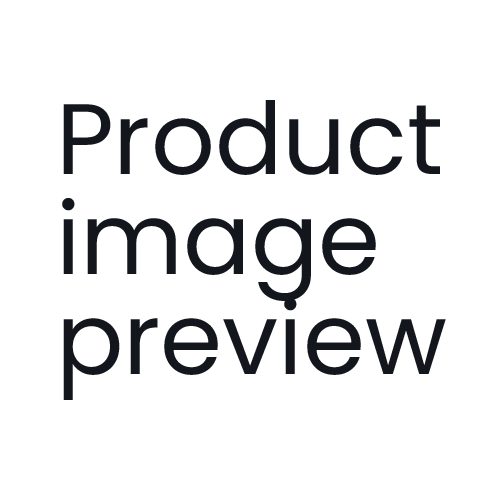
<style>
.page{position:relative;width:500px;height:500px;background:#ffffff}
.page>*{position:absolute;margin:0}
.t1{font:100px/100px "Poppins-Regular";color:#13171d}
</style>
<div class="page">
<p class="t1" style="left:62px;top:100px;width:384px;height:300px">Product<br>image<br>preview</p>
</div>
